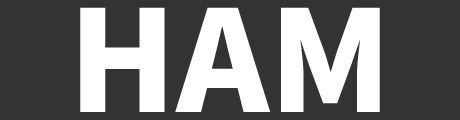
<style>
.page{position:relative;width:460px;height:120px;background:#333333}
.page>*{position:absolute;margin:0}
.t1{font:140px "NotoSansCJKkr-Black";color:#ffffff}
</style>
<div class="page">
<p class="t1" style="left:80px;top:7px;width:300px;height:105px">HAM</p>
</div>
